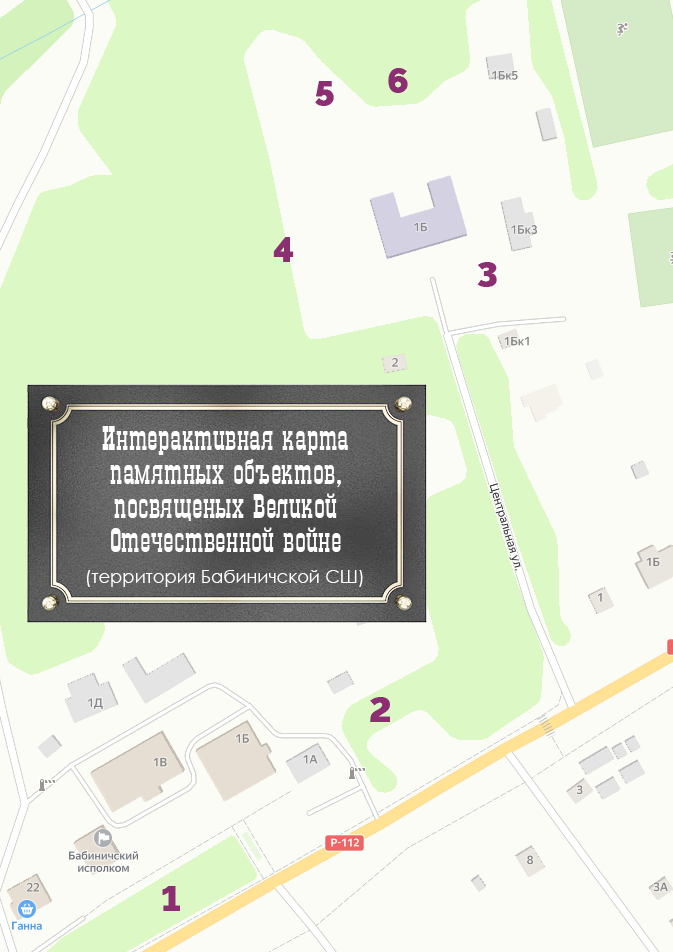
<style>
.page{position:relative;width:673px;height:952px;background:#fcfcf7}
.page>*{position:absolute;margin:0}
.t1{font:36px "Rawline-Black";color:#8b2f72}
.t2{font:33px/34px "GradPlain";color:#fffefe}
.t3{font:18px/31px "CenturyGothic";color:#fffefe}
</style>
<div class="page">
<p class="t1" style="left:388px;top:68px;width:20px;height:25px">6</p>
<p class="t1" style="left:315px;top:81px;width:19px;height:25px">5</p>
<p class="t1" style="left:273px;top:237px;width:21px;height:25px">4</p>
<p class="t1" style="left:477px;top:262px;width:20px;height:25px">3</p>
<p class="t2" style="left:87px;top:426px;width:276px;height:161px;text-align:center">Интерактивная карта памятных объектов, посвященых Великой Отечественной войне<br><span class="t3">(территория Бабиничской СШ)</span></p>
<p class="t1" style="left:370px;top:697px;width:20px;height:25px">2</p>
<p class="t1" style="left:162px;top:886px;width:18px;height:25px">1</p>
</div>
